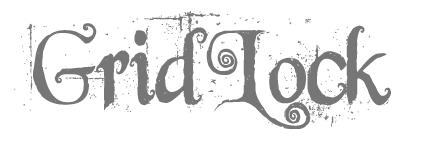
<style>
.page{position:relative;width:425px;height:142px;background:#ffffff}
.page>*{position:absolute;margin:0}
.t1{font:115.2px "BeyondWonderland";color:#777676;scale:0.89 1}
</style>
<div class="page">
<p class="t1" style="left:14px;top:11px;width:377px;height:118px">GridLock</p>
</div>
